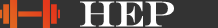
<style>
.page{position:relative;width:218px;height:28px;background:#333333}
.page>*{position:absolute;margin:0}
.t1{font:36px "EngraversMT";color:#ffffff}
</style>
<div class="page">
<p class="t1" style="left:80px;top:1px;width:94px;height:26px">HEP</p>
</div>
